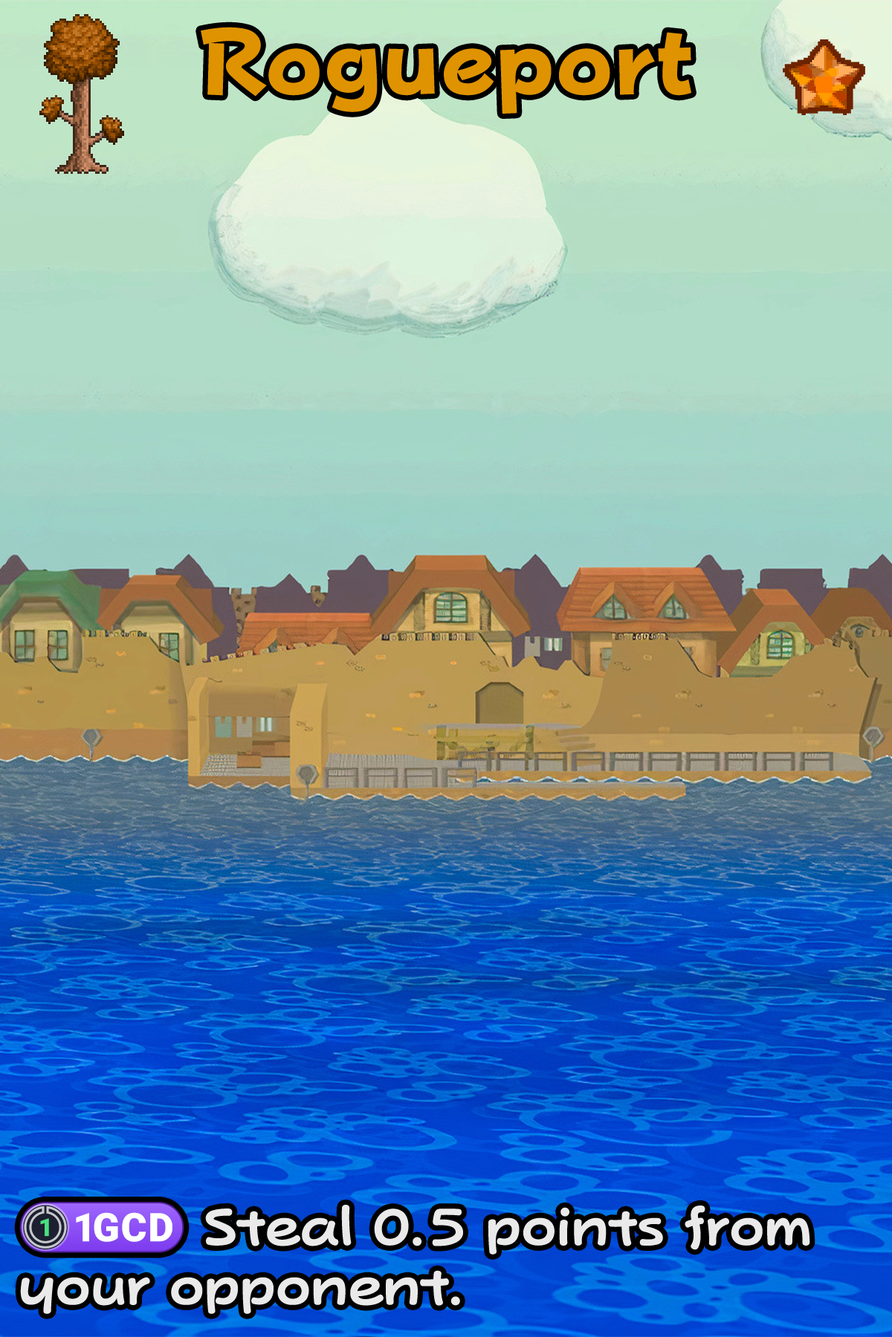
<style>
.page{position:relative;width:892px;height:1337px}
.page>*{position:absolute;margin:0}
.t1{font:160.2px "FOTPopHappinessStrp-ExtraBold";color:#df9300}
.t2{font:89.2px "PopJoyStd-B";color:#eaeaea}
.t3{font:89.2px "stoogedings-Regular";color:#eaeaea}
</style>
<div class="page">
<p class="t1" style="left:201px;top:27px;width:490px;height:87px">Rogueport</p>
<p class="t2" style="left:19px;top:1202px;width:791px;height:112px"><span class="t3">(1GCD)</span> Steal 0.5 points from your opponent.</p>
</div>
